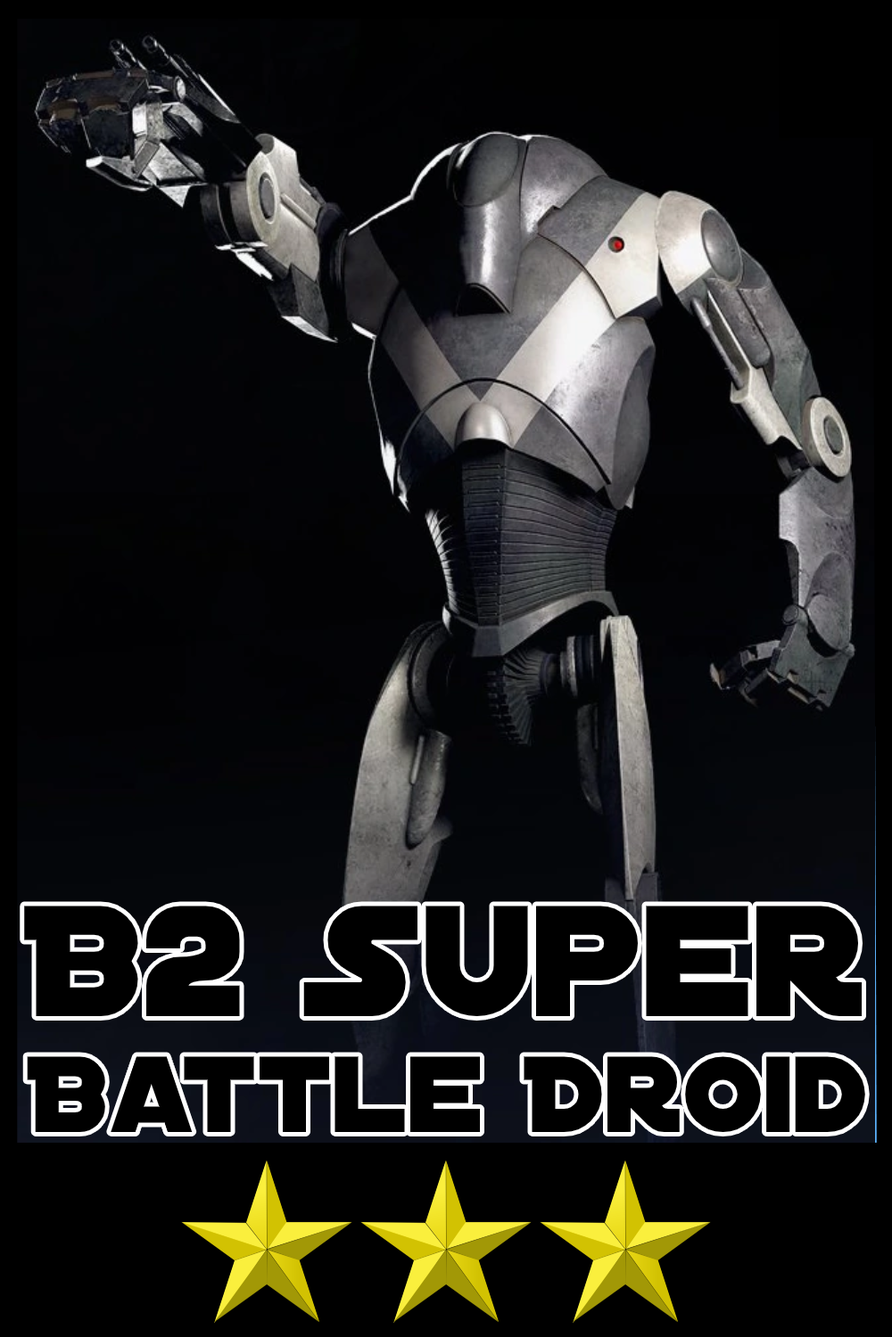
<style>
.page{position:relative;width:892px;height:1337px;background:#000000}
.page>*{position:absolute;margin:0}
.t1{font:115.9px/115.9px "DistantGalaxy";color:#000000}
.t2{font:169.4px/111.5px "DistantGalaxy";color:#000000}
</style>
<div class="page">
<p class="t1" style="left:24px;top:906px;width:841px;height:226px;text-align:center"><span class="t2">B2 Super<br></span>Battle Droid</p>
</div>
